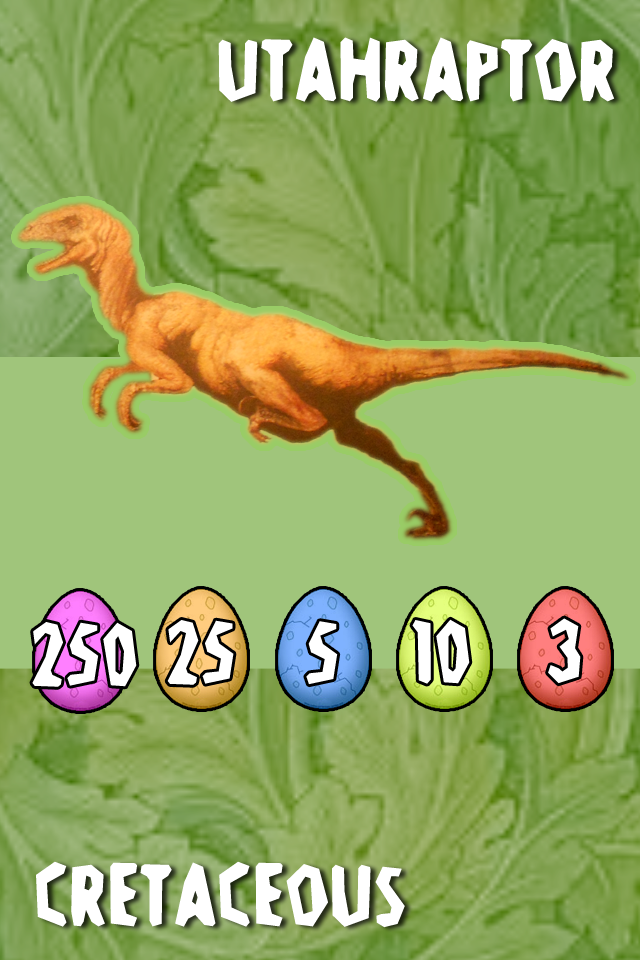
<style>
.page{position:relative;width:640px;height:960px;background:#a0c57b}
.page>*{position:absolute;margin:0}
.t1{font:96px "Stone-Age";color:#ffffff}
</style>
<div class="page">
<p class="t1" style="left:218px;top:37px;width:397px;height:65px">UtahRaptor</p>
<p class="t1" style="left:32px;top:622px;width:105px;height:65px">250</p>
<p class="t1" style="left:167px;top:620px;width:67px;height:65px">25</p>
<p class="t1" style="left:306px;top:621px;width:32px;height:64px">5</p>
<p class="t1" style="left:412px;top:619px;width:58px;height:65px">10</p>
<p class="t1" style="left:548px;top:618px;width:33px;height:66px">3</p>
<p class="t1" style="left:36px;top:861px;width:369px;height:67px">Cretaceous</p>
</div>
